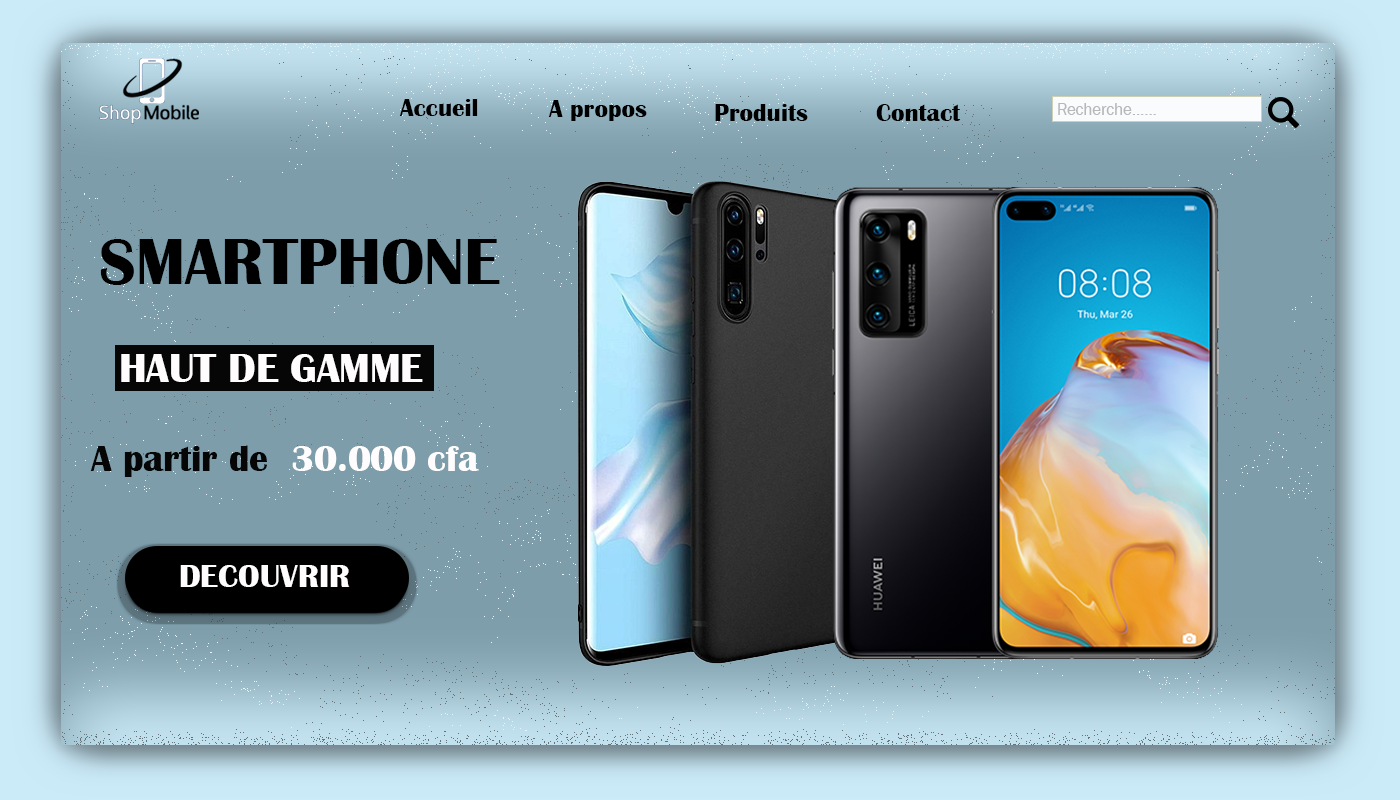
<style>
.page{position:relative;width:1400px;height:800px;background:#7d9dab}
.page>*{position:absolute;margin:0}
.t1{font:25px "BritannicBold";color:#000000}
.t2{font:16.7px "FranklinGothic-Book";color:#b7b8b9}
.t3{font:66.7px "BritannicBold";color:#000000}
.t4{font:41.7px "BritannicBold";color:#fefcfc}
.t5{font:37.5px "BritannicBold";color:#060606}
.t6{font:37.5px "BritannicBold";color:#fefcfc}
.t7{font:33.3px "BritannicBold";color:#fefcfc}
</style>
<div class="page">
<p class="t1" style="left:399px;top:98px;width:79px;height:18px">Accueil</p>
<p class="t1" style="left:548px;top:100px;width:99px;height:21px">A propos</p>
<p class="t1" style="left:715px;top:103px;width:93px;height:18px">Produits</p>
<p class="t1" style="left:876px;top:104px;width:85px;height:17px">Contact</p>
<p class="t2" style="left:1058px;top:103px;width:98px;height:12px">Recherche......</p>
<p class="t3" style="left:100px;top:239px;width:400px;height:46px">SMARTPHONE</p>
<p class="t4" style="left:121px;top:354px;width:302px;height:28px">HAUT DE GAMME</p>
<p class="t5" style="left:90px;top:445px;width:177px;height:32px">A partir de</p>
<p class="t6" style="left:292px;top:446px;width:187px;height:25px">30.000 cfa</p>
<p class="t7" style="left:180px;top:565px;width:170px;height:22px">DECOUVRIR</p>
</div>
